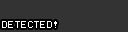
<style>
.page{position:relative;width:128px;height:32px;background:#333333}
.page>*{position:absolute;margin:0}
.t1{font:8px "Terminal";letter-spacing:0.05em;color:#ffffff}
</style>
<div class="page">
<p class="t1" style="left:2px;top:21px;width:55px;height:7px">DETECTED!</p>
</div>
